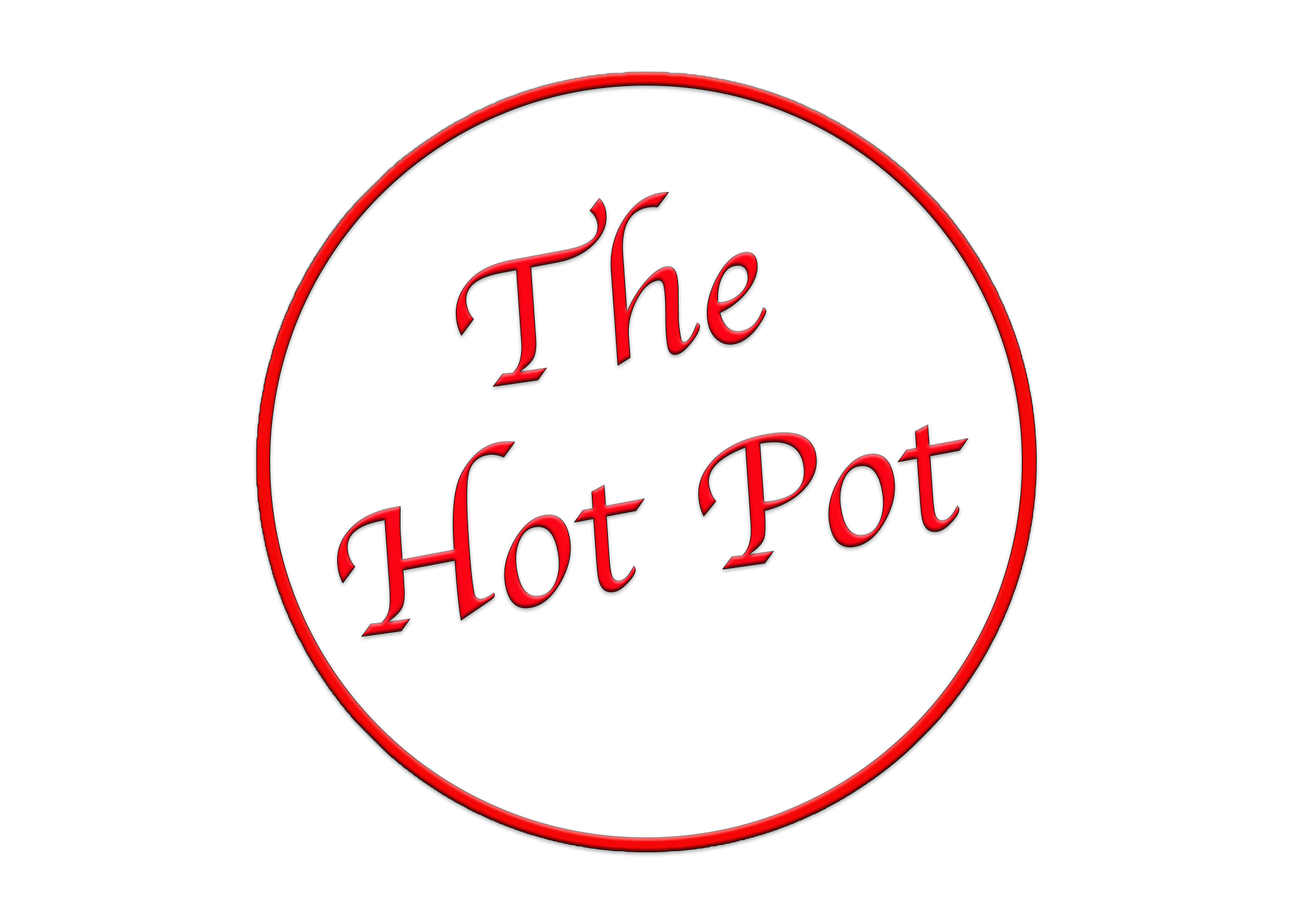
<style>
.page{position:relative;width:1292px;height:923px;background:#ffffff}
.page>*{position:absolute;margin:0}
.t1{font:184.6px "Apple-Chancery";scale:1.04 1}
</style>
<div class="page">
<p class="t1" style="left:337px;top:192px;width:632px;height:445px;text-align:center;rotate:-11deg">The<br>Hot Pot</p>
</div>
